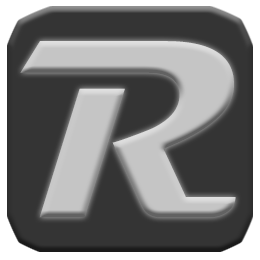
<style>
.page{position:relative;width:260px;height:260px;background:#343434}
.page>*{position:absolute;margin:0}
.t1{font:256.3px "Magneto-Bold";color:#c5c5c5}
</style>
<div class="page">
<p class="t1" style="left:20px;top:41px;width:216px;height:177px">R</p>
</div>
